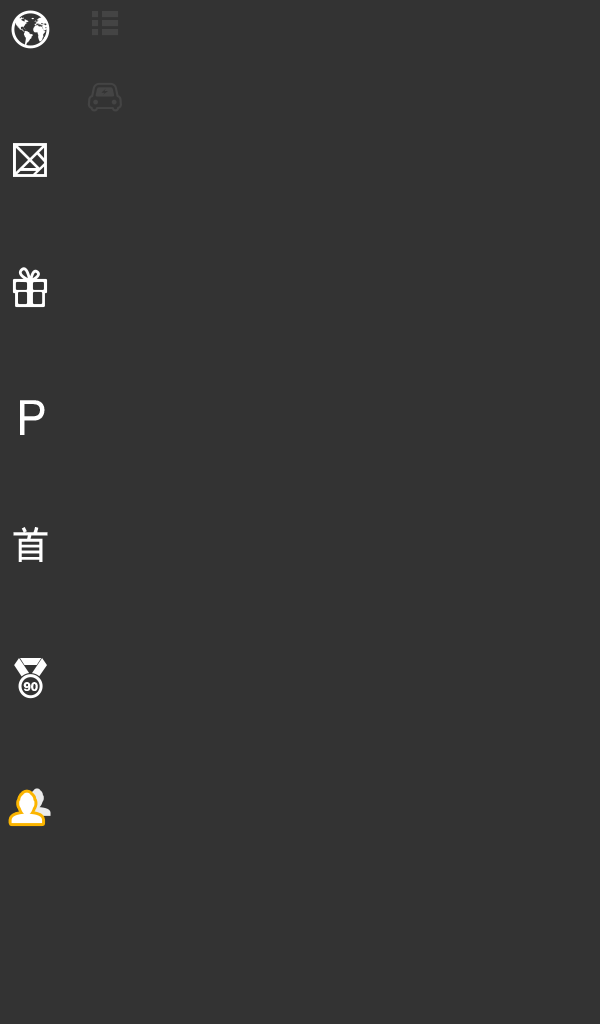
<style>
.page{position:relative;width:600px;height:1024px;background:#333333}
.page>*{position:absolute;margin:0}
.t1{font:48.6px "FZHTFW--GB1-0";color:#ffffff;scale:0.94 1}
.t2{font:37.8px "¾­µäÆ½ºÚ¼ò Regular";letter-spacing:0.1em;color:#ffffff;scale:1.04 1}
.t3{font:12.4px "FZCCHJW--GB1-0";color:#ffffff;scale:0.88 1}
</style>
<div class="page">
<p class="t1" style="left:20px;top:400px;width:25px;height:35px">P</p>
<p class="t2" style="left:13px;top:527px;width:35px;height:35px">首</p>
<p class="t3" style="left:23px;top:682px;width:15px;height:9px">90</p>
</div>
